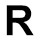
<style>
.page{position:relative;width:40px;height:40px;background:#ffffff}
.page>*{position:absolute;margin:0}
.t1{font:41.7px "Arial-BoldMT";color:#000000}
</style>
<div class="page">
<p class="t1" style="left:6px;top:5px;width:28px;height:31px">R</p>
</div>
